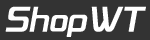
<style>
.page{position:relative;width:150px;height:40px;background:#333333}
.page>*{position:absolute;margin:0}
.t1{font:32.8px "BY-Forvi-[C]3.00";letter-spacing:0.025em;color:#ffffff;font-weight:bold;font-style:italic}
</style>
<div class="page">
<p class="t1" style="left:5px;top:6px;width:141px;height:31px">ShopWT</p>
</div>
